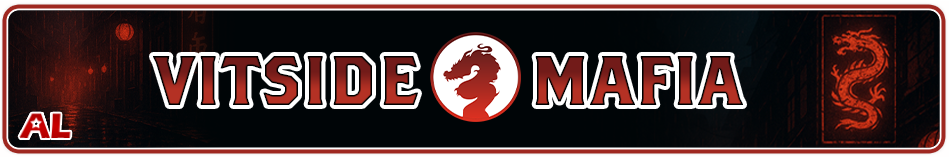
<style>
.page{position:relative;width:950px;height:158px;background:#000507}
.page>*{position:absolute;margin:0}
.t1{font:69.2px "BrothersOT-Regular";text-transform:uppercase;font-weight:bold}
</style>
<div class="page">
<p class="t1" style="left:153px;top:56px;width:265px;height:49px">Vitside</p>
<p class="t1" style="left:535px;top:56px;width:208px;height:49px">mafia</p>
</div>
